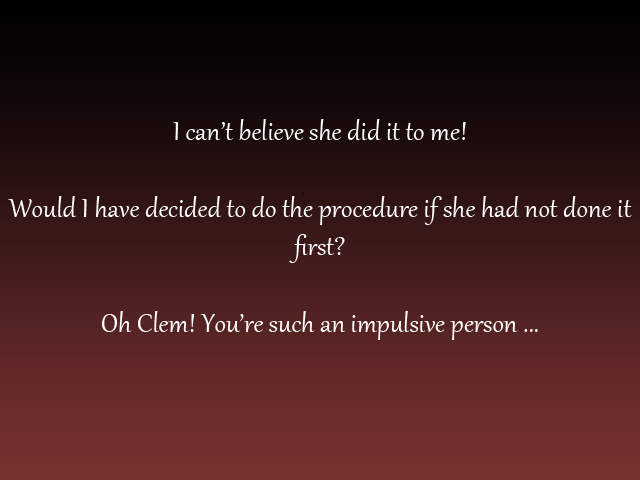
<style>
.page{position:relative;width:640px;height:480px}
.page>*{position:absolute;margin:0}
.t1{font:32px "Gabriola";color:#ffffff}
.t2{font:37.3px "Gabriola";color:#ffffff}
</style>
<div class="page">
<p class="t1" style="left:8px;top:119px;width:624px;height:221px;text-align:center"><span class="t2"><br></span><br><br>I can’t believe she did it to me!<br><br>Would I have decided to do the procedure if she had not done it first?<br><br>Oh Clem! You’re such an impulsive person ...</p>
</div>
